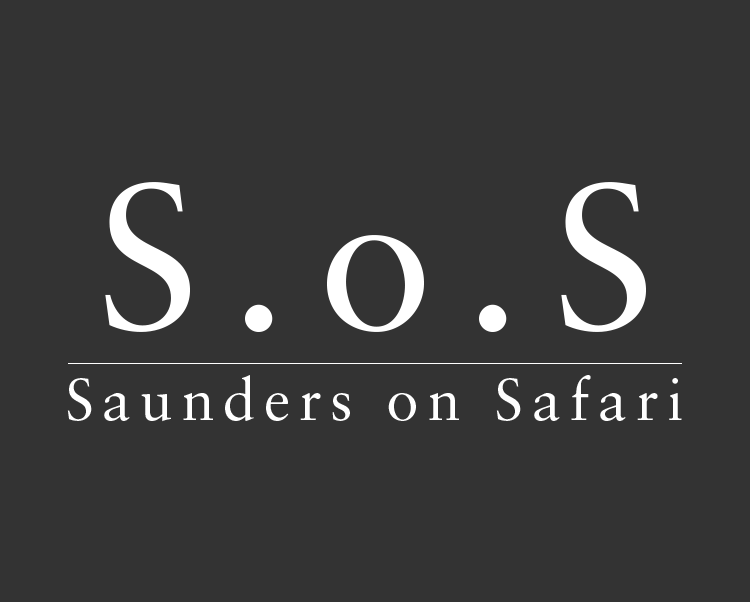
<style>
.page{position:relative;width:750px;height:602px;background:#333333}
.page>*{position:absolute;margin:0}
.t1{font:206.5px "SabonLTStd-Roman";letter-spacing:0.15em;color:#ffffff}
.t2{font:58.3px "SabonLTStd-Roman";letter-spacing:0.15em;color:#ffffff}
</style>
<div class="page">
<p class="t1" style="left:105px;top:182px;width:541px;height:150px">S.o.S</p>
<p class="t2" style="left:67px;top:375px;width:615px;height:47px">Saunders on Safari</p>
</div>
